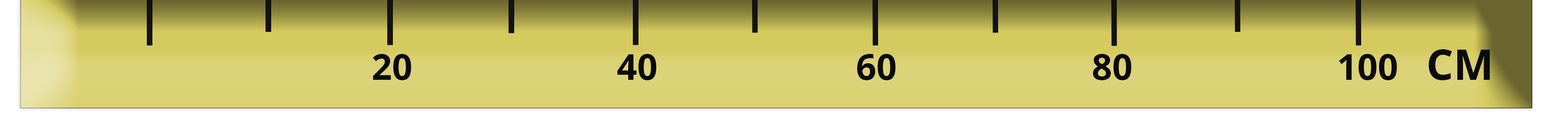
<style>
.page{position:relative;width:1568px;height:135px}
.page>*{position:absolute;margin:0}
.t1{font:42.6px "OpenSans-Bold";color:#0b0b0b}
.t2{font:35.8px "OpenSans-Bold";color:#0b0b0b}
</style>
<div class="page">
<p class="t1" style="left:1428px;top:49px;width:62px;height:31px">CM</p>
<p class="t2" style="left:373px;top:54px;width:1024px;height:26px">20              40              60             80              100</p>
</div>
